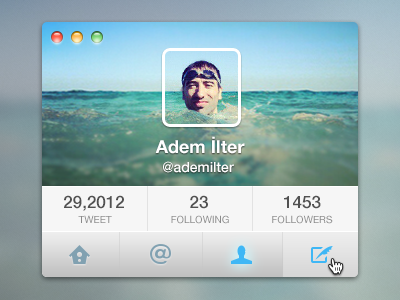
<style>
.page{position:relative;width:400px;height:300px}
.page>*{position:absolute;margin:0}
.t1{font:18px "HelveticaNeue-Bold";color:#ffffff}
.t2{font:14px "HelveticaNeue-Medium";color:#ffffff}
.t3{font:17px "HelveticaNeue-Medium";color:#515151}
.t4{font:10px "HelveticaNeue";color:#8a8a8a}
</style>
<div class="page">
<p class="t1" style="left:155px;top:136px;width:90px;height:18px">Adem İlter</p>
<p class="t2" style="left:163px;top:161px;width:71px;height:12px">@ademilter</p>
<p class="t3" style="left:64px;top:195px;width:60px;height:16px">29,2012</p>
<p class="t3" style="left:190px;top:195px;width:18px;height:14px">23</p>
<p class="t3" style="left:284px;top:195px;width:37px;height:14px">1453</p>
<p class="t4" style="left:78px;top:215px;width:34px;height:8px">TWEET</p>
<p class="t4" style="left:171px;top:215px;width:58px;height:9px">FOLLOWING</p>
<p class="t4" style="left:272px;top:215px;width:61px;height:9px">FOLLOWERS</p>
</div>
